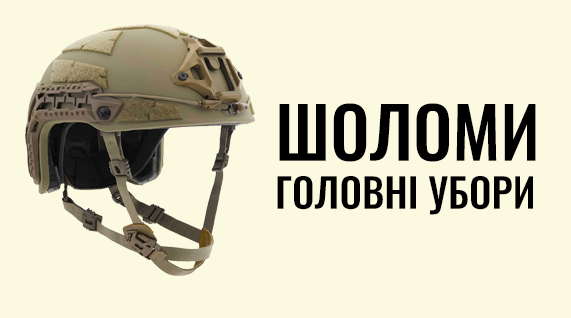
<style>
.page{position:relative;width:571px;height:318px;background:#fbf9e0}
.page>*{position:absolute;margin:0}
.t1{font:40px "Oswald-Medium";color:#000000}
.t2{font:70px "Oswald-Medium";color:#000000}
</style>
<div class="page">
<p class="t1" style="left:277px;top:103px;width:259px;height:112px"><span class="t2">ШОЛОМИ <br></span>ГОЛОВНІ УБОРИ</p>
</div>
